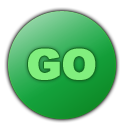
<style>
.page{position:relative;width:128px;height:128px;background:#ffffff}
.page>*{position:absolute;margin:0}
.t1{font:42px "Arial-Black";letter-spacing:-0.02em;color:#81ef7e;font-weight:bold}
</style>
<div class="page">
<p class="t1" style="left:28px;top:48px;width:68px;height:32px">GO</p>
</div>
